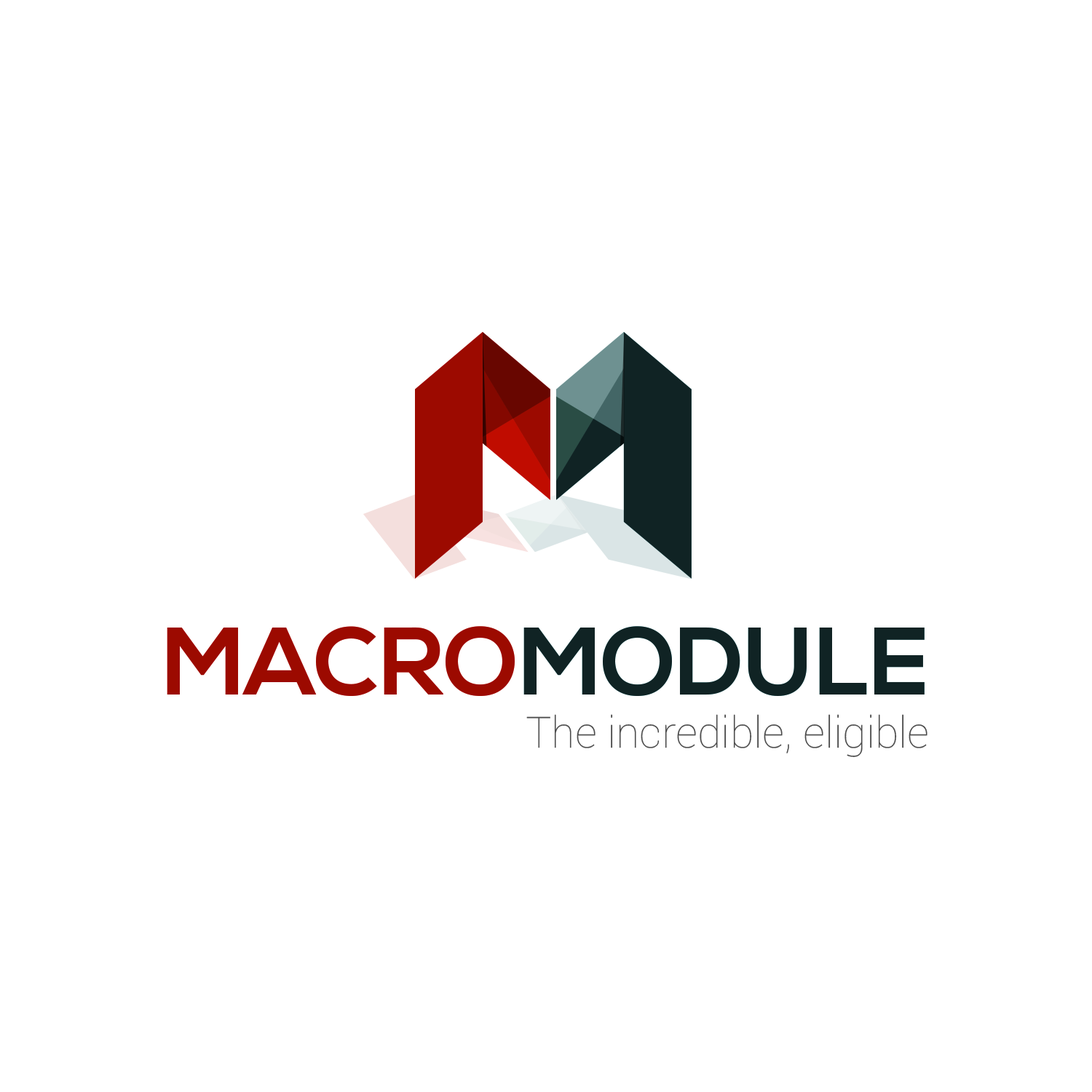
<style>
.page{position:relative;width:1092px;height:1092px;background:#ffffff}
.page>*{position:absolute;margin:0}
.t1{font:95.5px "NexaBold";color:#102324}
.t2{font:95.5px "NexaBold";color:#9c0a00}
.t3{font:43.2px "Roboto-Thin";color:#4d4d4d}
</style>
<div class="page">
<p class="t1" style="left:167px;top:626px;width:758px;height:70px"><span class="t2">MACRO</span>MODULE</p>
<p class="t3" style="left:526px;top:714px;width:401px;height:43px">The incredible, eligible</p>
</div>
